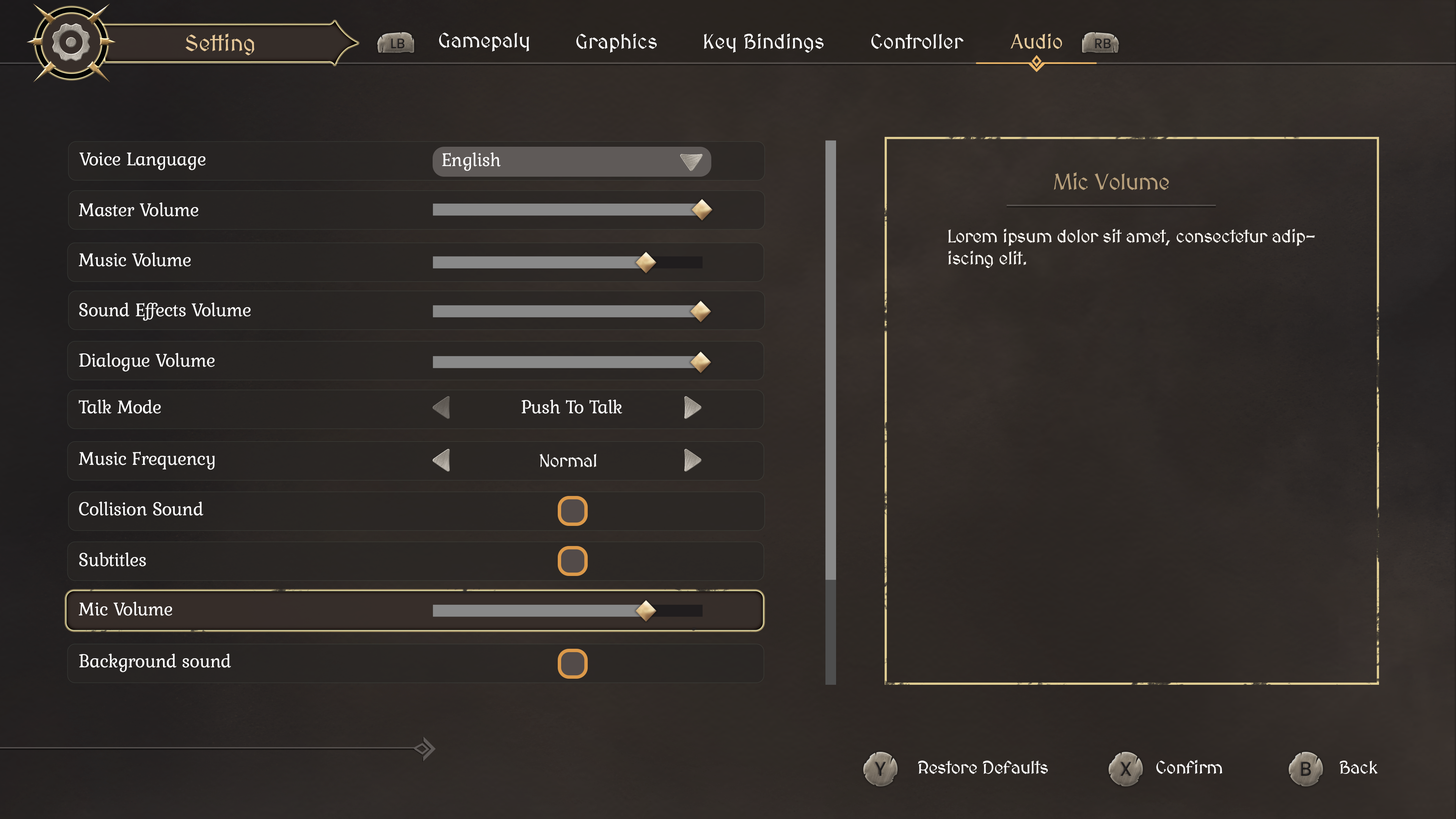
<style>
.page{position:relative;width:1456px;height:819px}
.page>*{position:absolute;margin:0}
.t1{font:22.7px "MedievalSharp";color:#e6c899}
.t2{font:20.5px "MedievalSharp";color:#fefefe}
.t3{font:20.5px "MedievalSharp";color:#ffffff}
.t4{font:20.5px "MedievalSharp";color:#e7cb9c}
.t5{font:19.2px "Kurale-Regular";letter-spacing:-0.02em;color:#ffffff}
.t6{font:22.7px "MedievalSharp";letter-spacing:-0.02em;color:#b79f7b}
.t7{font:18.2px "MedievalSharp";letter-spacing:-0.02em;color:#fffbf5}
.t8{font:18.2px "MedievalSharp";letter-spacing:-0.02em;color:#ffffff}
</style>
<div class="page">
<p class="t1" style="left:185px;top:33px;width:69px;height:22px">Setting</p>
<p class="t2" style="left:439px;top:33px;width:90px;height:19px">Gamepaly</p>
<p class="t3" style="left:576px;top:33px;width:81px;height:20px">Graphics</p>
<p class="t3" style="left:704px;top:33px;width:120px;height:20px">Key Bindings</p>
<p class="t3" style="left:871px;top:34px;width:93px;height:15px">Controller</p>
<p class="t4" style="left:1010px;top:33px;width:52px;height:16px">Audio</p>
<p class="t5" style="left:79px;top:152px;width:127px;height:18px">Voice Language</p>
<p class="t5" style="left:442px;top:152px;width:59px;height:19px">English</p>
<p class="t6" style="left:1054px;top:172px;width:115px;height:18px">Mic Volume</p>
<p class="t5" style="left:78px;top:202px;width:120px;height:15px">Master Volume</p>
<p class="t7" style="left:948px;top:229px;width:367px;height:39px">Lorem ipsum dolor sit amet, consectetur adipiscing elit.</p>
<p class="t5" style="left:78px;top:253px;width:113px;height:14px">Music Volume</p>
<p class="t5" style="left:79px;top:303px;width:172px;height:18px">Sound Effects Volume</p>
<p class="t5" style="left:79px;top:353px;width:136px;height:19px">Dialogue Volume</p>
<p class="t5" style="left:78px;top:400px;width:83px;height:14px">Talk Mode</p>
<p class="t5" style="left:521px;top:400px;width:101px;height:14px">Push To Talk</p>
<p class="t5" style="left:78px;top:452px;width:137px;height:18px">Music Frequency</p>
<p class="t8" style="left:540px;top:454px;width:56px;height:13px">Normal</p>
<p class="t5" style="left:79px;top:502px;width:124px;height:14px">Collision Sound</p>
<p class="t5" style="left:79px;top:552px;width:67px;height:14px">Subtitles</p>
<p class="t5" style="left:78px;top:602px;width:94px;height:14px">Mic Volume</p>
<p class="t5" style="left:79px;top:654px;width:152px;height:18px">Background sound</p>
<p class="t8" style="left:918px;top:761px;width:130px;height:13px">Restore Defaults</p>
<p class="t8" style="left:1156px;top:760px;width:66px;height:14px">Confirm</p>
<p class="t8" style="left:1340px;top:761px;width:38px;height:13px">Back</p>
</div>
